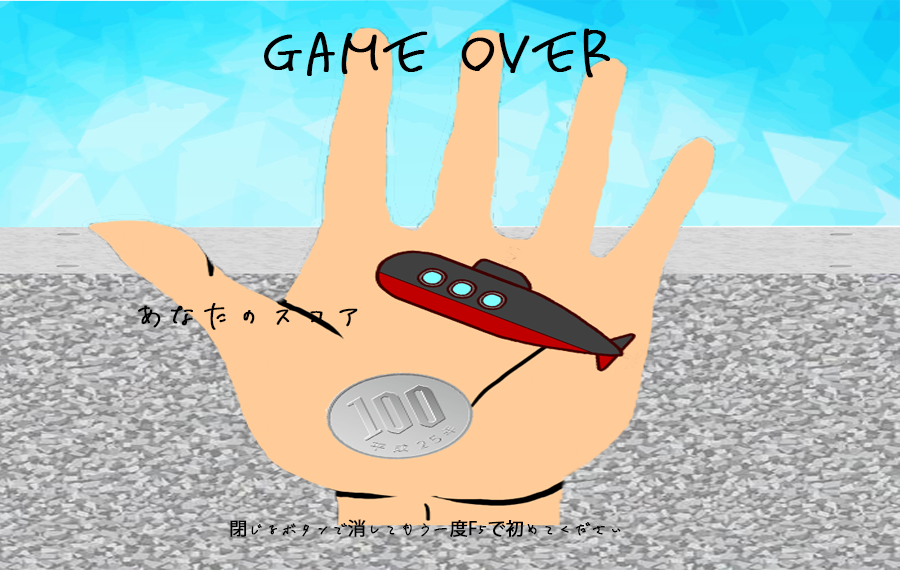
<style>
.page{position:relative;width:900px;height:570px}
.page>*{position:absolute;margin:0}
.t1{font:72px "karakaze-R";color:#000000;font-weight:bold}
.t2{font:36px "karakaze-R";color:#000000;font-weight:bold}
.t3{font:18px "karakaze-R";color:#000000;font-weight:bold}
.t4{font:18px "KozGoPr6N-Regular";color:#000000;font-weight:bold}
</style>
<div class="page">
<p class="t1" style="left:264px;top:28px;width:346px;height:50px">Game Over</p>
<p class="t2" style="left:138px;top:302px;width:220px;height:28px">あなたのスコア</p>
<p class="t3" style="left:230px;top:519px;width:391px;height:18px"><span class="t4">閉</span>じるボタンで<span class="t4">消</span>してもう一<span class="t4">度F</span>5<span class="t4">で初</span>めてください</p>
</div>
